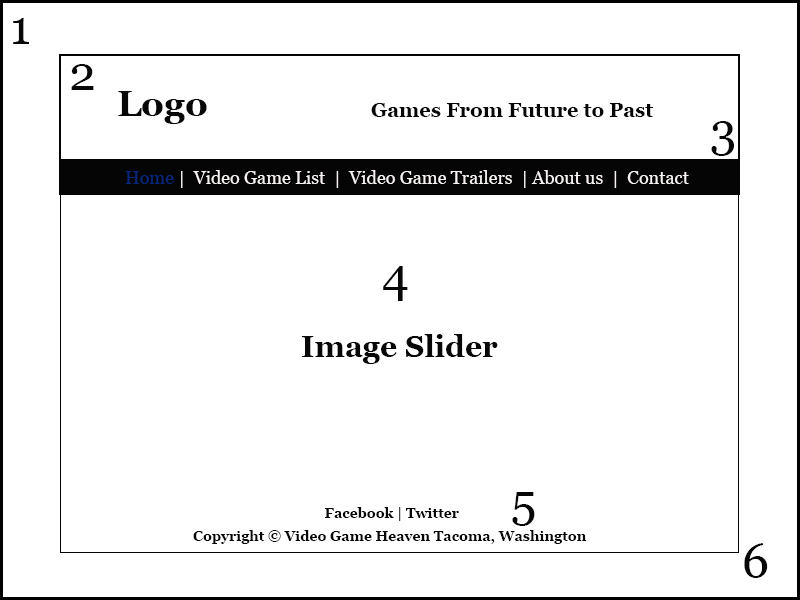
<style>
.page{position:relative;width:800px;height:600px;background:#ffffff}
.page>*{position:absolute;margin:0}
.t1{font:48px "Georgia";color:#070707}
.t2{font:36px "Georgia-Bold";color:#070707}
.t3{font:20px "Georgia-Bold";color:#070707}
.t4{font:18px "Georgia";color:#f8f2f2}
.t5{font:18px "Georgia";color:#082577}
.t6{font:30px "Georgia-Bold";color:#070707}
.t7{font:14px "Georgia-Bold";color:#070707}
</style>
<div class="page">
<p class="t1" style="left:13px;top:18px;width:16px;height:26px">1</p>
<p class="t1" style="left:71px;top:64px;width:23px;height:26px">2</p>
<p class="t2" style="left:118px;top:91px;width:89px;height:33px">Logo</p>
<p class="t3" style="left:371px;top:103px;width:283px;height:14px">Games From Future to Past</p>
<p class="t1" style="left:711px;top:121px;width:23px;height:35px">3</p>
<p class="t4" style="left:125px;top:170px;width:564px;height:18px"><span class="t5">Home</span> |  Video Game List  |  Video Game Trailers  | About us  |  Contact</p>
<p class="t1" style="left:383px;top:266px;width:25px;height:35px">4</p>
<p class="t6" style="left:301px;top:334px;width:197px;height:30px">Image Slider</p>
<p class="t1" style="left:512px;top:492px;width:23px;height:34px">5</p>
<p class="t7" style="left:325px;top:507px;width:134px;height:14px">Facebook | Twitter</p>
<p class="t7" style="left:193px;top:530px;width:394px;height:14px">Copyright © Video Game Heaven Tacoma, Washington</p>
<p class="t1" style="left:744px;top:543px;width:24px;height:35px">6</p>
</div>
